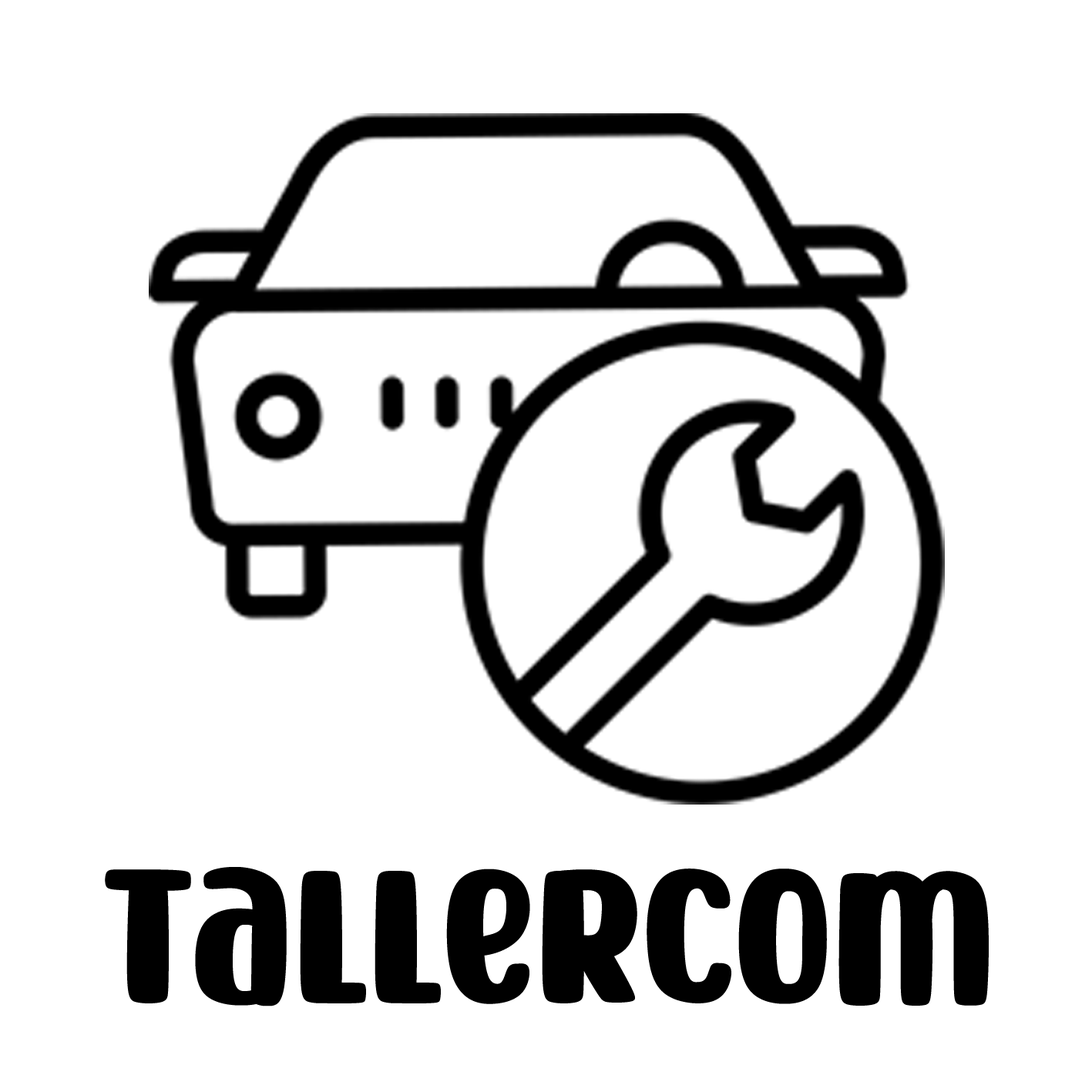
<style>
.page{position:relative;width:1092px;height:1092px;background:#ffffff}
.page>*{position:absolute;margin:0}
.t1{font:192.7px "CaramelSweets";color:#000000}
</style>
<div class="page">
<p class="t1" style="left:105px;top:867px;width:884px;height:139px">TallerCom</p>
</div>
